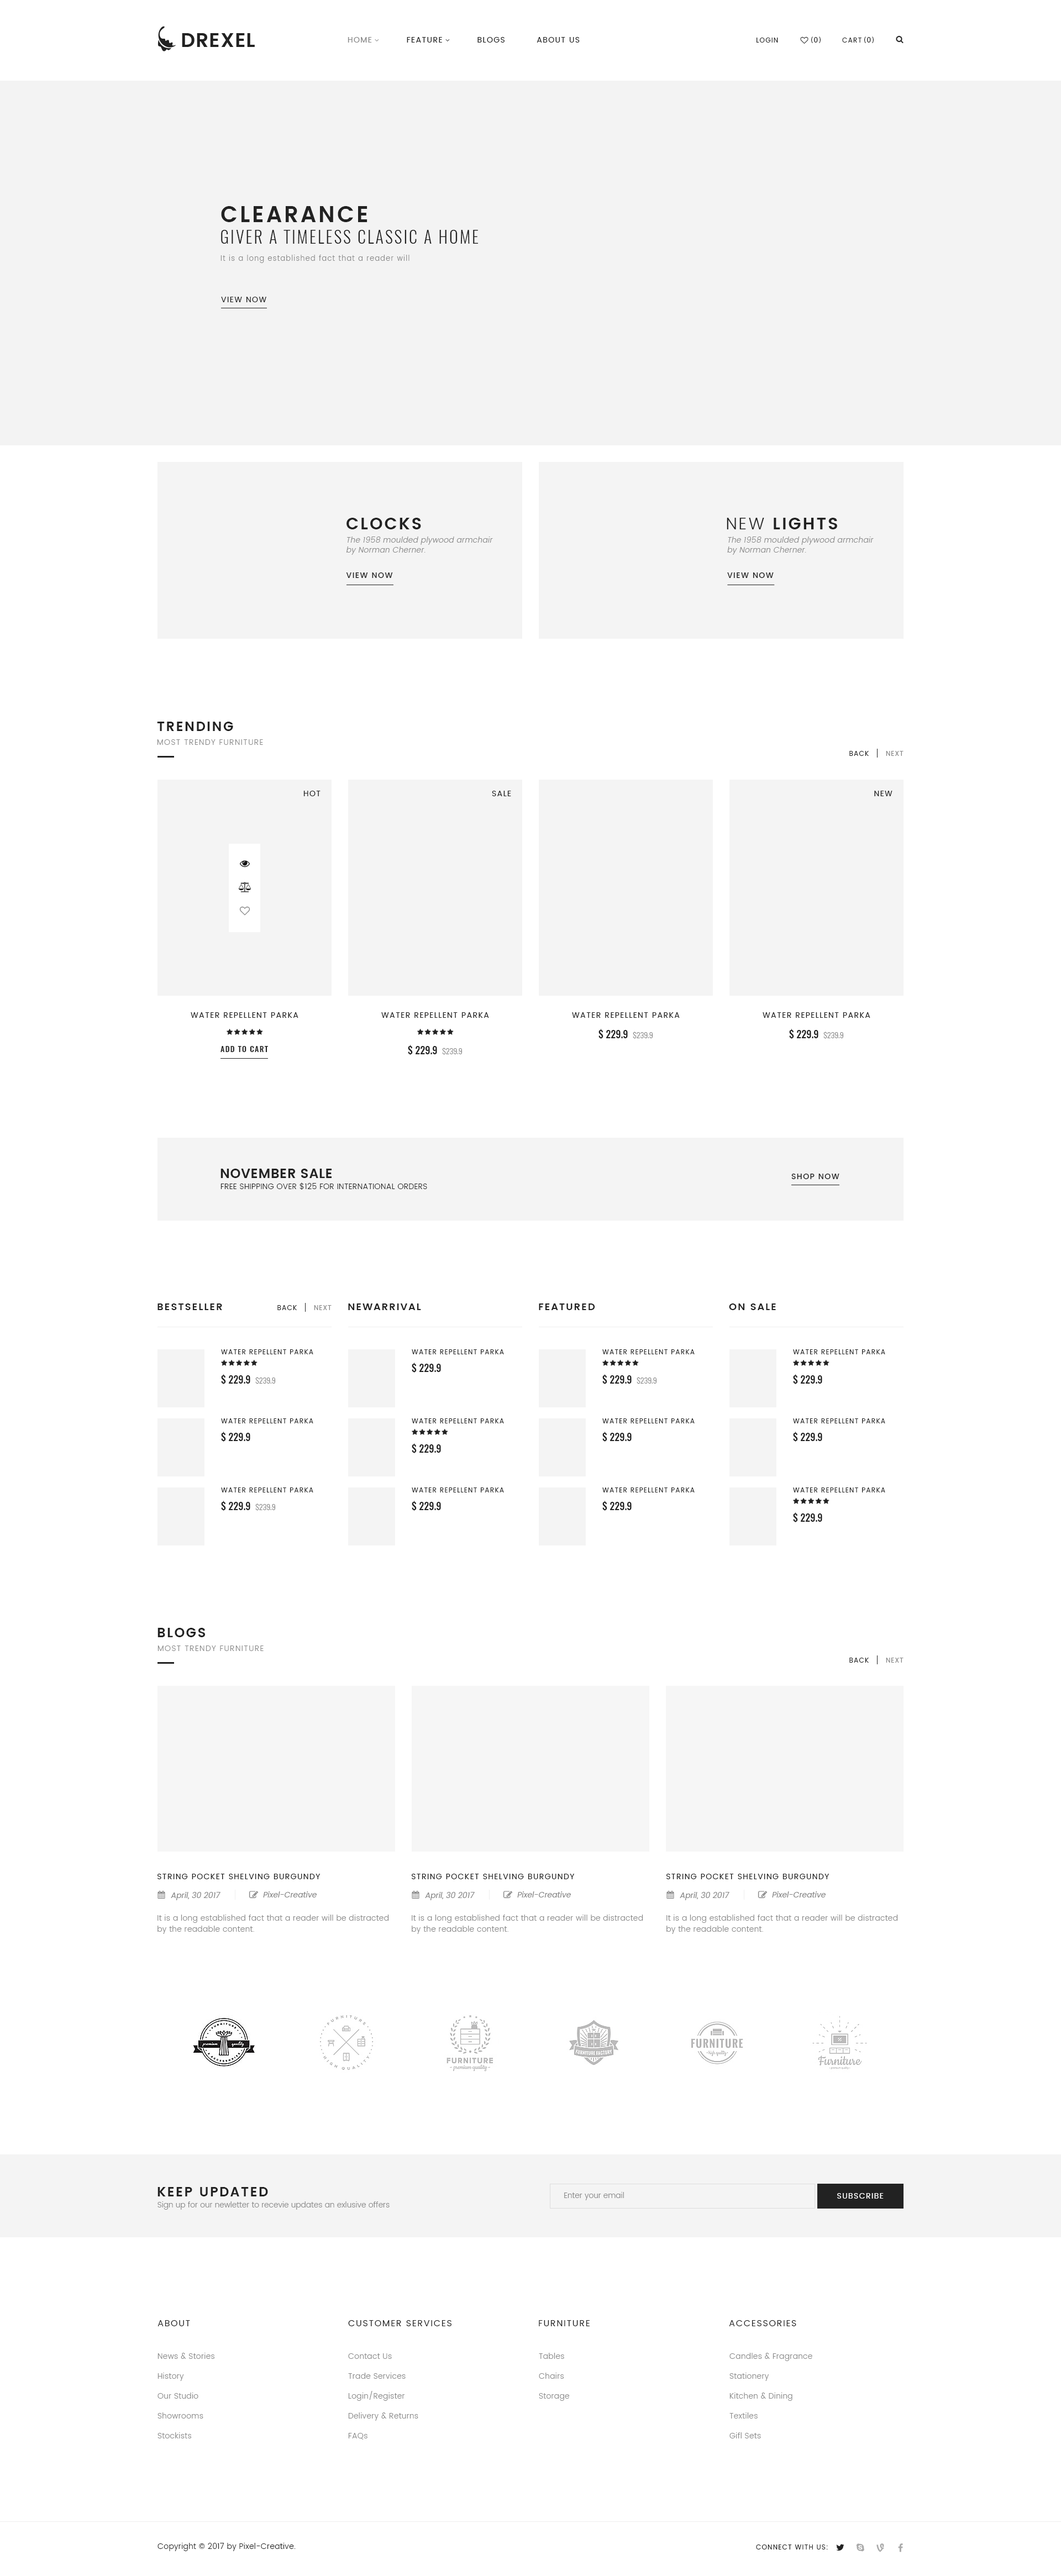
<style>
.page{position:relative;width:1061px;height:2576px;background:#ffffff}
.page>*{position:absolute;margin:0}
.t1{font:7.7px "Poppins-Regular";letter-spacing:0.1em;color:#222222;text-transform:uppercase}
.t2{font:7.7px "Poppins-Regular";letter-spacing:0.1em;color:#888888;text-transform:uppercase}
.t3{font:6.6px "Poppins-Regular";letter-spacing:0.1em;color:#222222;text-transform:uppercase}
.t4{font:7.7px "MyriadPro-Regular";letter-spacing:0.1em;color:#222222;text-transform:uppercase}
.t5{font:22.1px "Poppins-SemiBold";letter-spacing:0.1em;color:#222222;text-transform:uppercase}
.t6{font:16.6px "Oswald-Light";letter-spacing:0.1em;color:#222222;text-transform:uppercase}
.t7{font:7.2px "Poppins-Light";letter-spacing:0.1em;color:#888888}
.t8{font:16.6px "Poppins-SemiBold";letter-spacing:0.1em;color:#222222;text-transform:uppercase}
.t9{font:16.6px "Poppins-Light";letter-spacing:0.1em;color:#222222;text-transform:uppercase}
.t10{font:7.7px/9.9px "Poppins-Light";letter-spacing:0.025em;color:#888888;font-style:italic}
.t11{font:7.7px "Poppins-Medium";letter-spacing:0.1em;color:#222222;text-transform:uppercase}
.t12{font:13.3px "Poppins-SemiBold";letter-spacing:0.1em;color:#222222;text-transform:uppercase}
.t13{font:7.7px "Poppins-Light";letter-spacing:0.1em;color:#888888;text-transform:uppercase}
.t14{font:6.6px "MyriadPro-Regular";letter-spacing:0.1em;color:#888888;text-transform:uppercase}
.t15{font:6.6px "Poppins-Regular";letter-spacing:0.1em;color:#888888;text-transform:uppercase}
.t16{font:9.9px "Oswald-Medium";color:#222222}
.t17{font:7.7px "Oswald-Light";color:#888888}
.t18{font:7.7px "Oswald-Medium";letter-spacing:0.1em;color:#222222;text-transform:uppercase}
.t19{font:13.3px "Poppins-SemiBold";letter-spacing:0.025em;color:#222222;text-transform:uppercase}
.t20{font:7.7px "Poppins-Light";letter-spacing:0.025em;color:#222222}
.t21{font:9.9px "Poppins-SemiBold";letter-spacing:0.1em;color:#222222;text-transform:uppercase}
.t22{font:7.7px "Poppins-Regular";color:#888888;font-style:italic}
.t23{font:7.7px/11.1px "Poppins-Light";letter-spacing:0.025em;color:#888888}
.t24{font:13.3px "Poppins-SemiBold";letter-spacing:0.1em;color:#222222}
.t25{font:7.7px "Poppins-Light";color:#888888}
.t26{font:7.7px "Poppins-Regular";letter-spacing:0.1em;color:#ffffff;text-transform:uppercase}
.t27{font:8.8px "Poppins-Regular";letter-spacing:0.1em;color:#222222;text-transform:uppercase}
.t28{font:7.7px/19.9px "Poppins-Light";letter-spacing:0.025em;color:#888888}
</style>
<div class="page">
<p class="t1" style="left:348px;top:37px;width:232px;height:6px"><span class="t2">Home</span>           Feature           Blogs          About Us</p>
<p class="t3" style="left:756px;top:38px;width:22px;height:5px">Login</p>
<p class="t4" style="left:811px;top:36px;width:10px;height:7px">(0)</p>
<p class="t3" style="left:842px;top:38px;width:19px;height:5px">Cart</p>
<p class="t4" style="left:864px;top:36px;width:10px;height:7px">(0)</p>
<p class="t5" style="left:221px;top:206px;width:146px;height:16px">Clearance</p>
<p class="t6" style="left:221px;top:230px;width:257px;height:14px">Giver a timeless classic a home</p>
<p class="t7" style="left:220px;top:255px;width:189px;height:8px">It is a long established fact that a reader will</p>
<p class="t1" style="left:221px;top:297px;width:45px;height:5px">View now</p>
<p class="t8" style="left:346px;top:518px;width:75px;height:11px">Clocks</p>
<p class="t8" style="left:727px;top:518px;width:110px;height:11px"><span class="t9">New</span> Lights</p>
<p class="t10" style="left:346px;top:537px;width:147px;height:18px">The 1958 moulded plywood armchair<br>by Norman Cherner.</p>
<p class="t10" style="left:727px;top:537px;width:147px;height:18px">The 1958 moulded plywood armchair<br>by Norman Cherner.</p>
<p class="t11" style="left:346px;top:572px;width:47px;height:6px">View now</p>
<p class="t11" style="left:727px;top:572px;width:47px;height:6px">View now</p>
<p class="t12" style="left:157px;top:722px;width:76px;height:9px">Trending</p>
<p class="t13" style="left:157px;top:739px;width:106px;height:6px">Most trendy furniture</p>
<p class="t3" style="left:849px;top:751px;width:20px;height:5px">Back</p>
<p class="t14" style="left:886px;top:751px;width:17px;height:5px"><span class="t15">N</span>ext</p>
<p class="t1" style="left:303px;top:791px;width:17px;height:5px">Hot</p>
<p class="t1" style="left:492px;top:791px;width:19px;height:5px">SAle</p>
<p class="t1" style="left:874px;top:791px;width:18px;height:5px">New</p>
<p class="t1" style="left:191px;top:1012px;width:107px;height:6px">Water Repellent Parka</p>
<p class="t1" style="left:381px;top:1012px;width:108px;height:6px">Water Repellent Parka</p>
<p class="t1" style="left:572px;top:1012px;width:108px;height:6px">Water Repellent Parka</p>
<p class="t1" style="left:763px;top:1012px;width:107px;height:6px">Water Repellent Parka</p>
<p class="t16" style="left:598px;top:1029px;width:55px;height:10px">$ 229.9  <span class="t17">$239.9</span></p>
<p class="t16" style="left:789px;top:1029px;width:55px;height:10px">$ 229.9  <span class="t17">$239.9</span></p>
<p class="t18" style="left:220px;top:1046px;width:48px;height:6px">Add to cart</p>
<p class="t16" style="left:408px;top:1045px;width:54px;height:10px">$ 229.9  <span class="t17">$239.9</span></p>
<p class="t19" style="left:220px;top:1169px;width:112px;height:9px">November sale</p>
<p class="t11" style="left:791px;top:1174px;width:48px;height:5px">Shop now</p>
<p class="t20" style="left:220px;top:1182px;width:207px;height:8px">FREE SHIPPING OVER $125 FOR INTERNATIONAL ORDERS</p>
<p class="t21" style="left:157px;top:1303px;width:65px;height:7px">Bestseller</p>
<p class="t3" style="left:277px;top:1305px;width:20px;height:5px">Back</p>
<p class="t14" style="left:314px;top:1305px;width:18px;height:5px"><span class="t15">N</span>ext</p>
<p class="t21" style="left:348px;top:1303px;width:73px;height:7px">Newarrival</p>
<p class="t21" style="left:539px;top:1303px;width:56px;height:7px">Featured</p>
<p class="t21" style="left:729px;top:1303px;width:47px;height:7px">On sale</p>
<p class="t3" style="left:221px;top:1349px;width:92px;height:5px">Water Repellent Parka</p>
<p class="t3" style="left:412px;top:1349px;width:92px;height:5px">Water Repellent Parka</p>
<p class="t3" style="left:602px;top:1349px;width:93px;height:5px">Water Repellent Parka</p>
<p class="t3" style="left:793px;top:1349px;width:92px;height:5px">Water Repellent Parka</p>
<p class="t16" style="left:412px;top:1363px;width:29px;height:10px">$ 229.9</p>
<p class="t16" style="left:221px;top:1374px;width:55px;height:11px">$ 229.9  <span class="t17">$239.9</span></p>
<p class="t16" style="left:602px;top:1374px;width:55px;height:11px">$ 229.9  <span class="t17">$239.9</span></p>
<p class="t16" style="left:793px;top:1374px;width:29px;height:11px">$ 229.9</p>
<p class="t3" style="left:221px;top:1418px;width:92px;height:5px">Water Repellent Parka</p>
<p class="t3" style="left:412px;top:1418px;width:92px;height:5px">Water Repellent Parka</p>
<p class="t3" style="left:602px;top:1418px;width:93px;height:5px">Water Repellent Parka</p>
<p class="t3" style="left:793px;top:1418px;width:92px;height:5px">Water Repellent Parka</p>
<p class="t16" style="left:221px;top:1432px;width:29px;height:10px">$ 229.9</p>
<p class="t16" style="left:602px;top:1432px;width:30px;height:10px">$ 229.9</p>
<p class="t16" style="left:793px;top:1432px;width:29px;height:10px">$ 229.9</p>
<p class="t16" style="left:412px;top:1443px;width:29px;height:11px">$ 229.9</p>
<p class="t3" style="left:221px;top:1487px;width:92px;height:5px">Water Repellent Parka</p>
<p class="t3" style="left:412px;top:1487px;width:92px;height:5px">Water Repellent Parka</p>
<p class="t3" style="left:602px;top:1487px;width:93px;height:5px">Water Repellent Parka</p>
<p class="t3" style="left:793px;top:1487px;width:92px;height:5px">Water Repellent Parka</p>
<p class="t16" style="left:221px;top:1501px;width:55px;height:10px">$ 229.9  <span class="t17">$239.9</span></p>
<p class="t16" style="left:412px;top:1501px;width:29px;height:10px">$ 229.9</p>
<p class="t16" style="left:602px;top:1501px;width:30px;height:10px">$ 229.9</p>
<p class="t16" style="left:793px;top:1512px;width:29px;height:11px">$ 229.9</p>
<p class="t12" style="left:157px;top:1628px;width:48px;height:9px">Blogs</p>
<p class="t13" style="left:157px;top:1646px;width:107px;height:5px">Most trendy furniture</p>
<p class="t3" style="left:849px;top:1658px;width:20px;height:5px">Back</p>
<p class="t14" style="left:886px;top:1658px;width:17px;height:5px"><span class="t15">N</span>ext</p>
<p class="t1" style="left:157px;top:1874px;width:163px;height:5px">String Pocket Shelving Burgundy</p>
<p class="t1" style="left:412px;top:1874px;width:163px;height:5px">String Pocket Shelving Burgundy</p>
<p class="t1" style="left:666px;top:1874px;width:163px;height:5px">String Pocket Shelving Burgundy</p>
<p class="t22" style="left:171px;top:1892px;width:49px;height:8px">April, 30 2017</p>
<p class="t22" style="left:263px;top:1891px;width:54px;height:6px">Pixel-Creative</p>
<p class="t22" style="left:425px;top:1892px;width:50px;height:8px">April, 30 2017</p>
<p class="t22" style="left:517px;top:1891px;width:54px;height:6px">Pixel-Creative</p>
<p class="t22" style="left:680px;top:1892px;width:49px;height:8px">April, 30 2017</p>
<p class="t22" style="left:772px;top:1891px;width:54px;height:6px">Pixel-Creative</p>
<p class="t23" style="left:157px;top:1915px;width:232px;height:19px">It is a long established fact that a reader will be distracted by the readable content.</p>
<p class="t23" style="left:412px;top:1915px;width:231px;height:19px">It is a long established fact that a reader will be distracted by the readable content.</p>
<p class="t23" style="left:666px;top:1915px;width:232px;height:19px">It is a long established fact that a reader will be distracted by the readable content.</p>
<p class="t24" style="left:157px;top:2187px;width:111px;height:9px">KEEP UPDATED</p>
<p class="t25" style="left:157px;top:2201px;width:233px;height:9px">Sign up for our newletter to recevie updates an exlusive offers</p>
<p class="t25" style="left:564px;top:2192px;width:60px;height:8px">Enter your email</p>
<p class="t26" style="left:837px;top:2193px;width:47px;height:6px">Subscribe</p>
<p class="t27" style="left:157px;top:2320px;width:33px;height:6px">About</p>
<p class="t27" style="left:348px;top:2320px;width:103px;height:6px">Customer services</p>
<p class="t27" style="left:539px;top:2320px;width:51px;height:6px">Furniture</p>
<p class="t27" style="left:729px;top:2320px;width:67px;height:6px">Accessories</p>
<p class="t28" style="left:157px;top:2353px;width:57px;height:85px">News &amp; Stories<br>History<br>Our Studio<br>Showrooms<br>Stockists</p>
<p class="t28" style="left:348px;top:2353px;width:70px;height:87px">Contact Us<br>Trade Services<br>Login/Register<br>Delivery &amp; Returns<br>FAQs</p>
<p class="t28" style="left:539px;top:2353px;width:30px;height:48px">Tables<br>Chairs<br>Storage</p>
<p class="t28" style="left:729px;top:2353px;width:83px;height:85px">Candles &amp; Fragrance<br>Stationery<br>Kitchen &amp; Dining<br>Textiles<br>Gifl Sets</p>
<p class="t20" style="left:157px;top:2543px;width:139px;height:8px">Copyright © 2017 by Pixel-Creative.</p>
<p class="t3" style="left:756px;top:2545px;width:72px;height:4px">Connect with us:</p>
</div>
